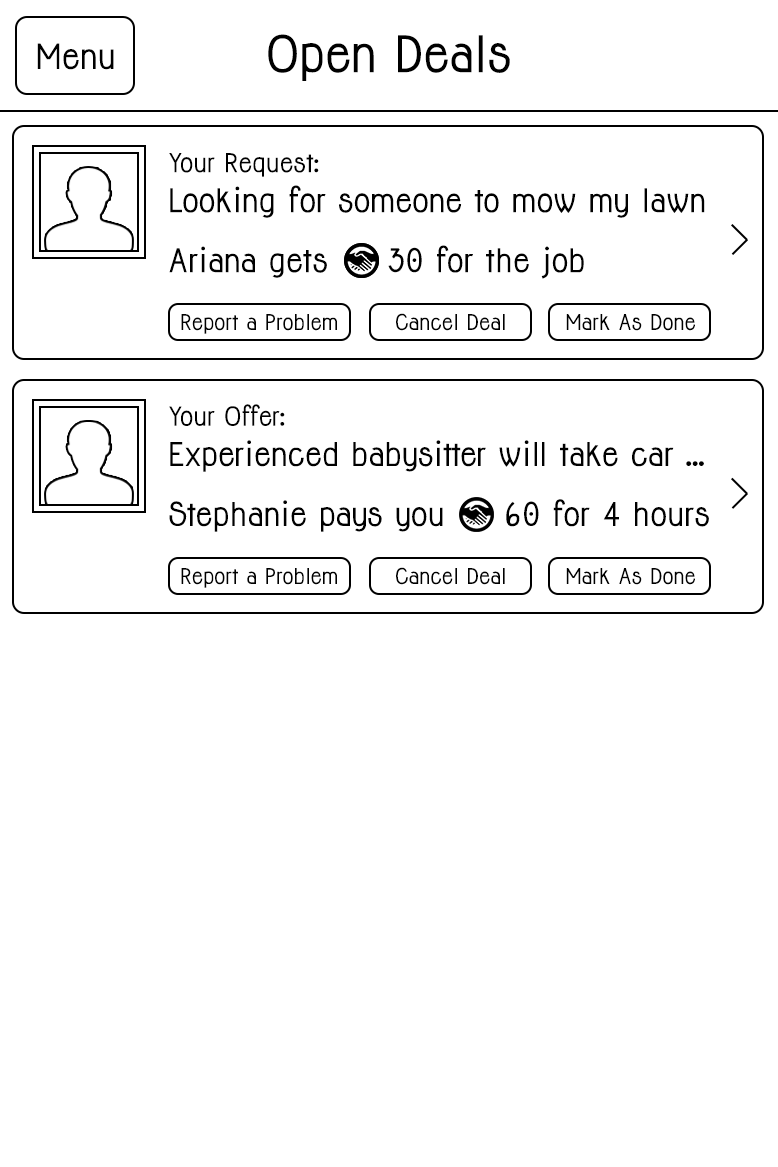
<style>
.page{position:relative;width:778px;height:1167px;background:#ffffff}
.page>*{position:absolute;margin:0}
.t1{font:46.2px "Jolly-Bold";color:#000000}
.t2{font:32px "Jolly-Bold";color:#000000}
.t3{font:30px/40px "Jolly-Bold";color:#000000}
.t4{font:24px/40px "Jolly-Bold";color:#000000}
.t5{font:30px/60px "Jolly-Bold";color:#000000}
.t6{font:20px "Jolly-Bold";color:#000000}
.t7{font:30px/40.1px "Jolly-Bold";color:#000000}
.t8{font:24px/40.1px "Jolly-Bold";color:#000000}
.t9{font:30px/60.1px "Jolly-Bold";color:#000000}
</style>
<div class="page">
<p class="t1" style="left:268px;top:34px;width:242px;height:47px">Open Deals</p>
<p class="t2" style="left:37px;top:43px;width:77px;height:27px">Menu</p>
<p class="t3" style="left:169px;top:153px;width:536px;height:126px"><span class="t4">Your Request:<br></span>Looking for someone to mow my lawn<br><span class="t5">Ariana gets     30 for the job</span></p>
<p class="t6" style="left:181px;top:314px;width:156px;height:20px">Report a Problem</p>
<p class="t6" style="left:396px;top:313px;width:109px;height:18px">Cancel Deal</p>
<p class="t6" style="left:566px;top:314px;width:129px;height:17px">Mark As Done</p>
<p class="t7" style="left:169px;top:404px;width:540px;height:128px"><span class="t8">Your Offer:<br></span>Experienced babysitter will take car ...<br><span class="t9">Stephanie pays you     60 for 4 hours</span></p>
<p class="t6" style="left:181px;top:568px;width:156px;height:20px">Report a Problem</p>
<p class="t6" style="left:396px;top:567px;width:109px;height:18px">Cancel Deal</p>
<p class="t6" style="left:566px;top:568px;width:129px;height:17px">Mark As Done</p>
</div>
